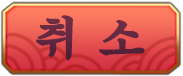
<style>
.page{position:relative;width:183px;height:76px}
.page>*{position:absolute;margin:0}
.t1{font:48px "MJemokBatang";letter-spacing:0.34em;color:#632840;font-weight:bold}
</style>
<div class="page">
<p class="t1" style="left:36px;top:15px;width:109px;height:46px">취소</p>
</div>
